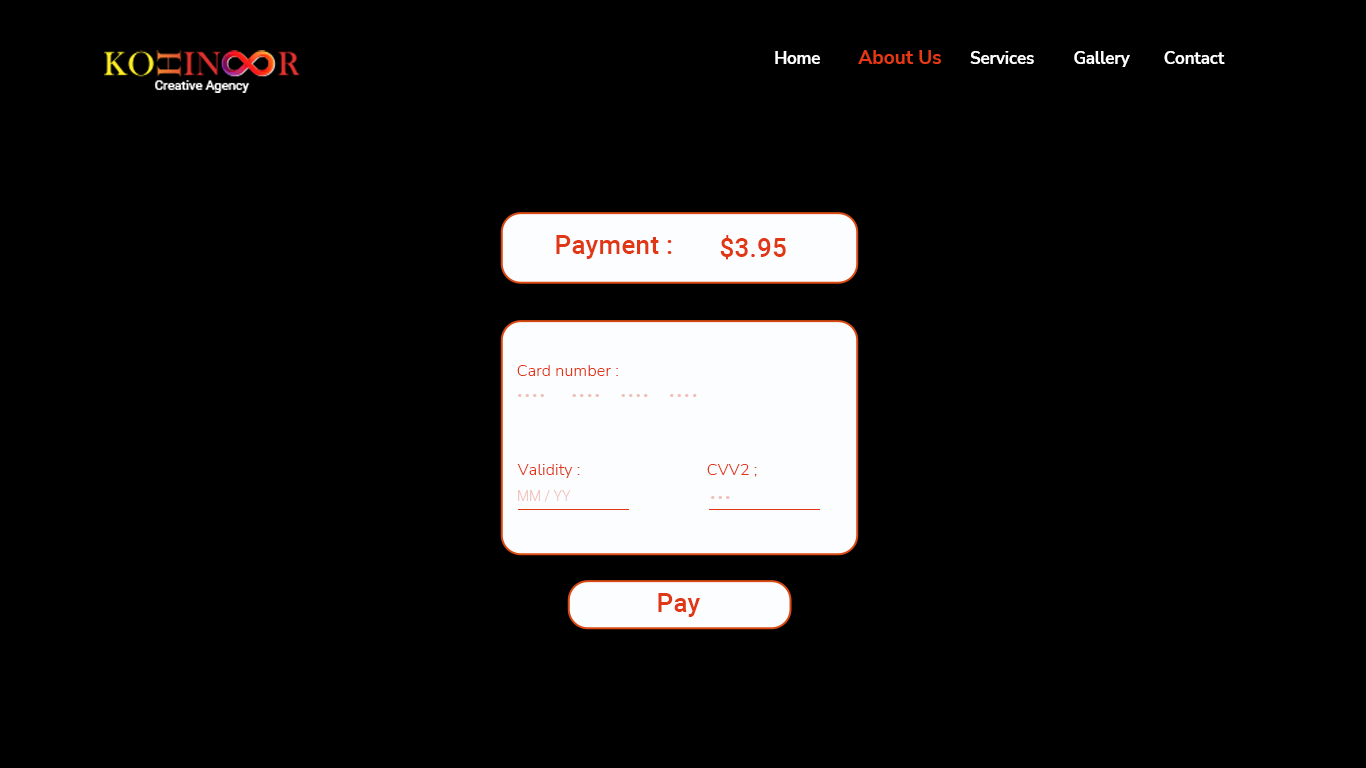
<style>
.page{position:relative;width:1366px;height:768px;background:#000000}
.page>*{position:absolute;margin:0}
.t1{font:16.6px "NunitoSans-Bold";color:#ffffff}
.t2{font:19px "NunitoSans-Bold";color:#e53814}
.t3{font:26.4px "Roboto-Medium";color:#e03714}
.t4{font:16.4px "NunitoSans-Light";color:#e03613}
.t5{font:24.3px "ArialRoundedMTBold";color:#eec0b8}
.t6{font:14px "Roboto-Light";color:#eec0b8}
</style>
<div class="page">
<p class="t1" style="left:775px;top:51px;width:45px;height:13px">Home</p>
<p class="t2" style="left:858px;top:50px;width:83px;height:14px">About Us</p>
<p class="t1" style="left:970px;top:51px;width:64px;height:13px">Services</p>
<p class="t1" style="left:1074px;top:51px;width:56px;height:16px">Gallery</p>
<p class="t1" style="left:1164px;top:51px;width:61px;height:13px">Contact</p>
<p class="t3" style="left:556px;top:235px;width:116px;height:24px">Payment :</p>
<p class="t3" style="left:720px;top:235px;width:66px;height:25px">$3.95</p>
<p class="t4" style="left:517px;top:365px;width:101px;height:11px">Card number :</p>
<p class="t5" style="left:518px;top:394px;width:179px;height:3px">....    ....   ....   ....</p>
<p class="t4" style="left:517px;top:464px;width:63px;height:14px">Validity :</p>
<p class="t4" style="left:707px;top:464px;width:50px;height:13px">CVV2 ;</p>
<p class="t6" style="left:518px;top:490px;width:53px;height:12px">MM / YY</p>
<p class="t5" style="left:711px;top:496px;width:19px;height:3px">...</p>
<p class="t3" style="left:658px;top:593px;width:42px;height:24px">Pay</p>
</div>
